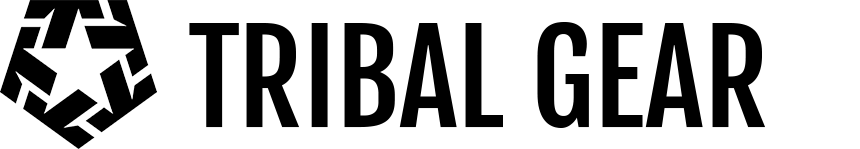
<style>
.page{position:relative;width:860px;height:149px;background:#ffffff}
.page>*{position:absolute;margin:0}
.t1{font:125px "FjallaOne-Regular";color:#000000}
</style>
<div class="page">
<p class="t1" style="left:189px;top:22px;width:577px;height:106px">TRIBAL GEAR</p>
</div>
